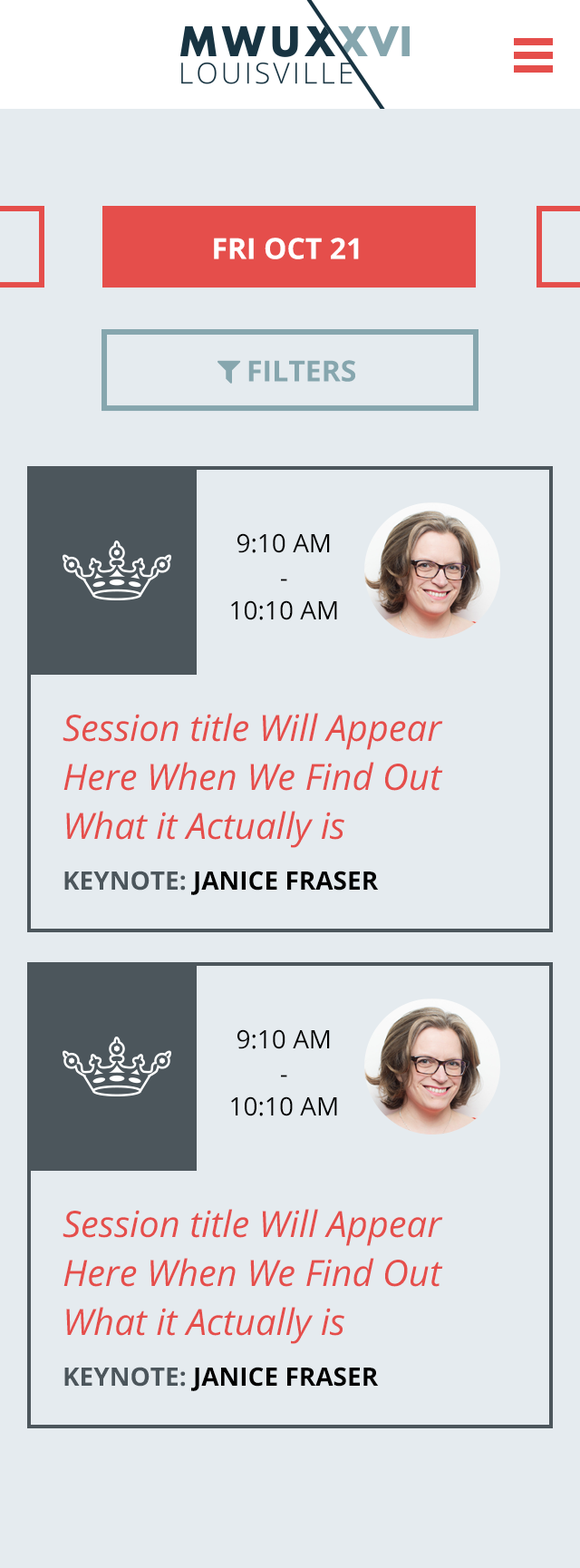
<style>
.page{position:relative;width:580px;height:1568px;background:#e5ebef}
.page>*{position:absolute;margin:0}
.t1{font:29px "OpenSans-Bold";color:#ffffff}
.t2{font:25.4px/32.6px "OpenSans";color:#000000}
.t3{font:36.3px/49px "OpenSans-Italic";color:#e54e4b}
.t4{font:25.4px/49px "OpenSans-Bold";color:#4c565c;text-transform:uppercase}
.t5{font:25.4px/49px "OpenSans-Bold";color:#000000;text-transform:uppercase}
</style>
<div class="page">
<p class="t1" style="left:214px;top:238px;width:145px;height:21px">FRI OCT 21</p>
<p class="t2" style="left:231px;top:533px;width:106px;height:87px;text-align:center">9:10 AM<br>-<br>10:10 AM</p>
<p class="t3" style="left:63px;top:713px;width:380px;height:182px">Session title Will Appear Here When We Find Out What it Actually is<br><span class="t4">KEYNOTE: </span><span class="t5">JANICE FRASER</span></p>
<p class="t2" style="left:231px;top:1029px;width:106px;height:87px;text-align:center">9:10 AM<br>-<br>10:10 AM</p>
<p class="t3" style="left:63px;top:1209px;width:380px;height:182px">Session title Will Appear Here When We Find Out What it Actually is<br><span class="t4">KEYNOTE: </span><span class="t5">JANICE FRASER</span></p>
</div>
